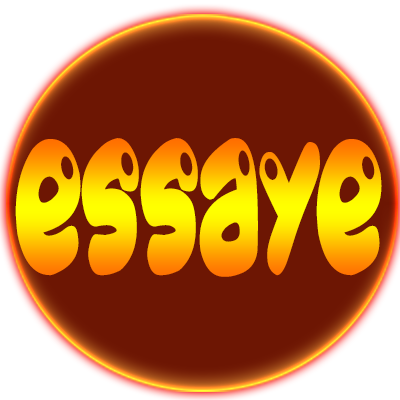
<style>
.page{position:relative;width:400px;height:400px;background:#6d1603}
.page>*{position:absolute;margin:0}
.t1{font:142.9px "JuicyFruity";scale:0.49 1}
</style>
<div class="page">
<p class="t1" style="left:15px;top:138px;width:367px;height:139px">essaye</p>
</div>
